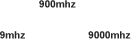
<style>
.page{position:relative;width:131px;height:53px;background:#ffffff}
.page>*{position:absolute;margin:0}
.t1{font:10px "Arial-BoldMT";color:#282828}
</style>
<div class="page">
<p class="t1" style="left:39px;top:0px;width:37px;height:8px">900mhz</p>
<p class="t1" style="left:0px;top:31px;width:25px;height:8px">9mhz</p>
<p class="t1" style="left:88px;top:31px;width:43px;height:8px">9000mhz</p>
</div>
